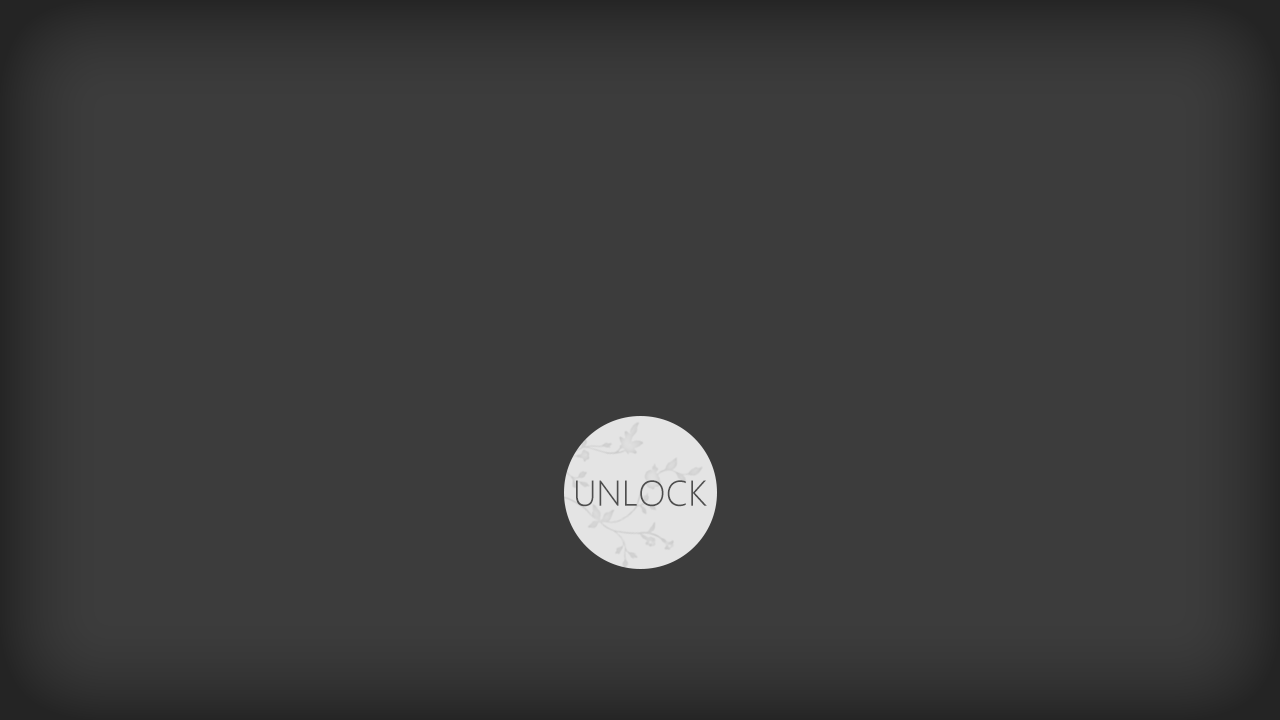
<style>
.page{position:relative;width:1280px;height:720px;background:#3c3c3c}
.page>*{position:absolute;margin:0}
.t1{font:33.3px "MicrosoftYaHeiUILight";color:#4e4e4e}
</style>
<div class="page">
<p class="t1" style="left:576px;top:480px;width:131px;height:27px">UNLOCK</p>
</div>
